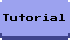
<style>
.page{position:relative;width:70px;height:40px;background:#9ca2ef}
.page>*{position:absolute;margin:0}
.t1{font:8px "PressStart2P-Regular";color:#000000}
</style>
<div class="page">
<p class="t1" style="left:3px;top:14px;width:63px;height:7px">Tutorial</p>
</div>
